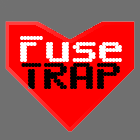
<style>
.page{position:relative;width:140px;height:140px;background:#707070}
.page>*{position:absolute;margin:0}
.t1{font:40px/26.7px "SixEightZeroNineChargen-Regular";color:#ffffff}
.t2{font:40px/26.7px "SixEightZeroNineChargen-Regular";color:#000000}
</style>
<div class="page">
<p class="t1" style="left:20px;top:36px;width:102px;height:53px;text-align:center">Fuse<br><span class="t2">TRAP</span></p>
</div>
